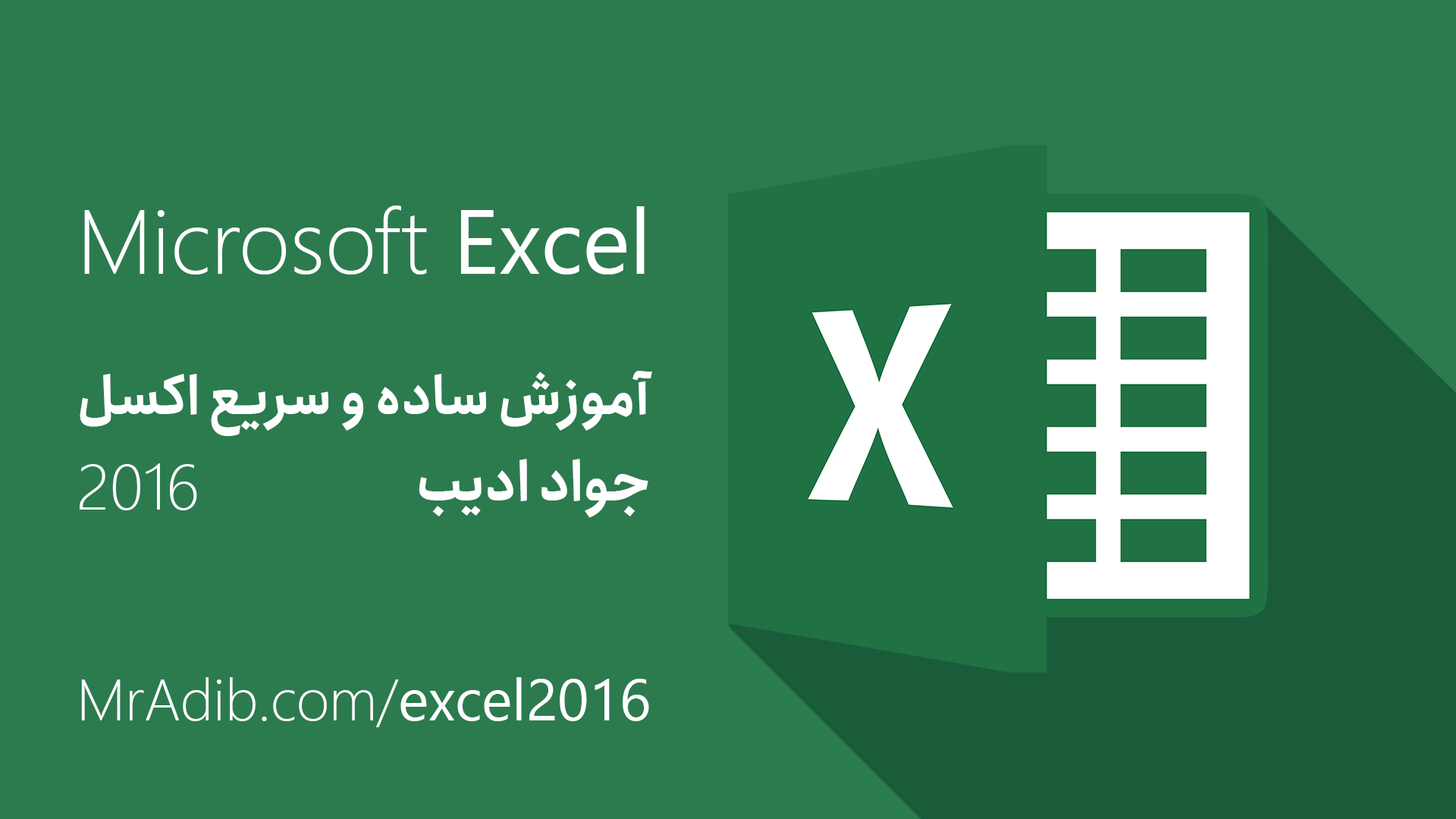
<style>
.page{position:relative;width:1456px;height:819px;background:#2b7b4f}
.page>*{position:absolute;margin:0}
.t1{font:90.8px "SegoeUI-Light";color:#ffffff}
.t2{font:90.8px "SegoeUI";color:#ffffff}
.t3{font:52.7px "Anjoman-Bold";color:#ffffff}
.t4{font:54.6px "Anjoman-Bold";color:#ffffff}
.t5{font:64.4px "SegoeUI-Light";color:#ffffff}
.t6{font:58px "SegoeUI-Light";color:#ffffff}
.t7{font:58px "SegoeUI";color:#ffffff}
</style>
<div class="page">
<p class="t1" style="left:84px;top:206px;width:561px;height:69px">Microsoft <span class="t2">Excel</span></p>
<p class="t3" style="left:80px;top:371px;width:572px;height:65px">آموزش ساده و سریع اکسل</p>
<p class="t4" style="left:419px;top:459px;width:229px;height:59px">جواد ادیب</p>
<p class="t5" style="left:80px;top:463px;width:117px;height:47px">2016</p>
<p class="t6" style="left:81px;top:677px;width:568px;height:50px">MrAdib.com/<span class="t7">excel2016</span></p>
</div>
